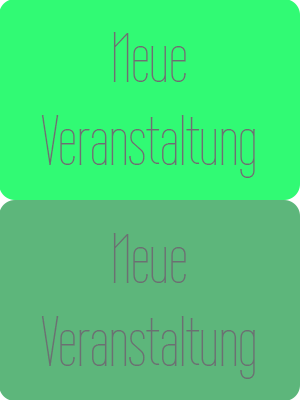
<style>
.page{position:relative;width:300px;height:400px;background:#31fa74}
.page>*{position:absolute;margin:0}
.t1{font:69px "WireOne";color:#6b7072}
</style>
<div class="page">
<p class="t1" style="left:41px;top:32px;width:214px;height:146px;text-align:center">Neue<br>Veranstaltung</p>
<p class="t1" style="left:41px;top:233px;width:214px;height:146px;text-align:center">Neue<br>Veranstaltung</p>
</div>
